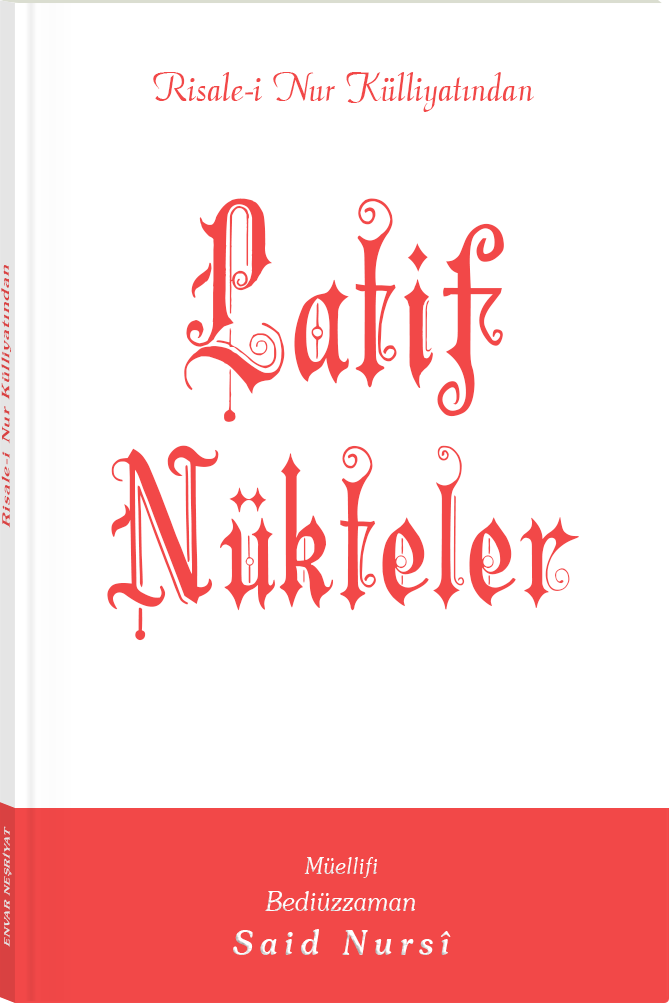
<style>
.page{position:relative;width:669px;height:1003px;background:#ffffff}
.page>*{position:absolute;margin:0}
.t1{font:45.3px "Barla © 072 Aria ScriptScriptSSi";color:#f24848;scale:0.94 1}
.t2{font:200.8px/223.9px "Barla © 001 Liva Nur";letter-spacing:-0.001em;color:#f24848;scale:0.92 1}
.t3{font:230.7px/205.8px "Barla © 001 Liva Nur";letter-spacing:-0.001em;color:#f24848;scale:0.92 1}
.t4{font:11.4px "Souvenir-Medium";letter-spacing:0.08em;color:#d94141;scale:1.65 1}
.t5{font:8.3px "Souvenir-Medium";letter-spacing:0.08em;color:#e5e5e5;scale:1.43 1}
.t6{font:27.1px/37.8px "Souvenir-LightItalic";color:#ffffff;scale:0.92 1}
.t7{font:22.8px/39.8px "Souvenir-LightItalic";color:#ffffff;scale:0.92 1}
.t8{font:33.9px/43.8px "Souvenir-MediumItalic";letter-spacing:0.2em;color:#ffffff;scale:0.92 1}
</style>
<div class="page">
<p class="t1" style="left:153px;top:72px;width:381px;height:40px">Risale-i Nur Külliyatından</p>
<p class="t2" style="left:107px;top:198px;width:472px;height:443px;text-align:center"><span class="t3">Latif<br></span>Nükteler</p>
<p class="t4" style="left:1px;top:265px;width:10px;height:263px;rotate:-90deg">Risale-i Nur Külliyatından</p>
<p class="t5" style="left:2px;top:826px;width:10px;height:121px;rotate:-90deg">ENVAR NEŞRİYAT</p>
<p class="t6" style="left:233px;top:857px;width:218px;height:98px;text-align:center"><span class="t7">Müellifi<br></span>Bediüzzaman<br><span class="t8">Said Nursî</span></p>
</div>
